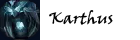
<style>
.page{position:relative;width:140px;height:40px;background:#ffffff}
.page>*{position:absolute;margin:0}
.t1{font:12px "VinerHandITC";color:#000000}
</style>
<div class="page">
<p class="t1" style="left:49px;top:10px;width:64px;height:15px">Karthus</p>
</div>
